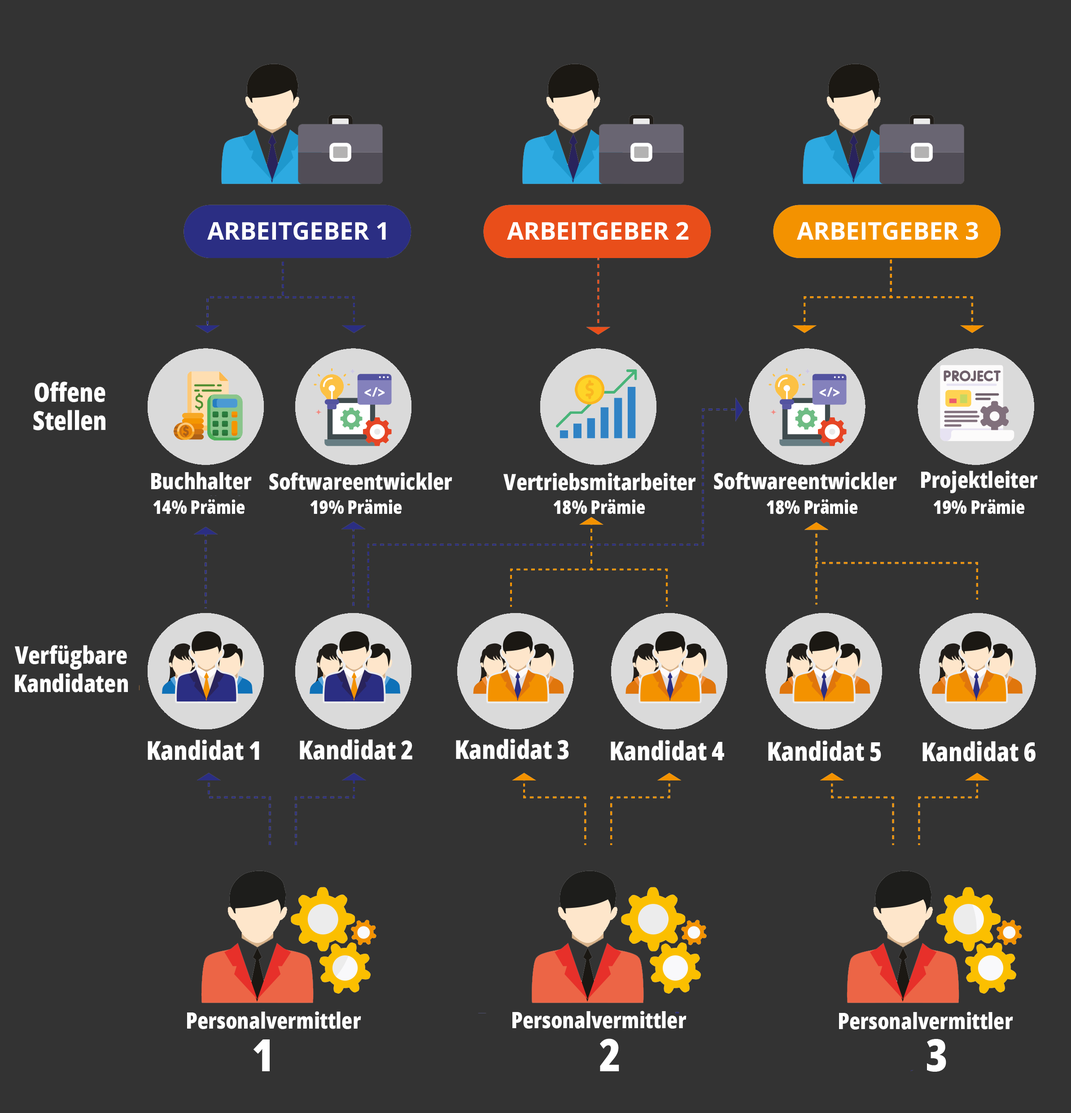
<style>
.page{position:relative;width:1071px;height:1113px;background:#333333}
.page>*{position:absolute;margin:0}
.t1{font:26.2px/28.1px "OpenSansRoman-CondensedExtraBold";color:#ffffff}
.t2{font:22.4px "OpenSansRoman-CondensedExtraBold";color:#ffffff}
.t3{font:18.7px "OpenSansRoman-CondensedExtraBold";color:#ffffff}
.t4{font:24.3px/28.1px "OpenSansRoman-CondensedExtraBold";color:#ffffff}
.t5{font:26.2px "OpenSansRoman-CondensedExtraBold";color:#ffffff}
.t6{font:44.9px "OpenSansRoman-CondensedExtraBold";color:#ffffff}
</style>
<div class="page">
<p class="t1" style="left:33px;top:381px;width:72px;height:49px;text-align:center">Offene<br>Stellen</p>
<p class="t2" style="left:151px;top:472px;width:101px;height:18px">Buchhalter</p>
<p class="t2" style="left:269px;top:472px;width:183px;height:18px">Softwareentwickler</p>
<p class="t2" style="left:504px;top:473px;width:192px;height:18px">Vertriebsmitarbeiter</p>
<p class="t2" style="left:714px;top:472px;width:183px;height:18px">Softwareentwickler</p>
<p class="t2" style="left:921px;top:470px;width:117px;height:23px">Projektleiter</p>
<p class="t3" style="left:153px;top:499px;width:92px;height:15px">14% Prämie</p>
<p class="t3" style="left:310px;top:499px;width:92px;height:15px">19% Prämie</p>
<p class="t3" style="left:553px;top:499px;width:92px;height:15px">18% Prämie</p>
<p class="t3" style="left:767px;top:499px;width:91px;height:15px">18% Prämie</p>
<p class="t3" style="left:934px;top:499px;width:91px;height:15px">19% Prämie</p>
<p class="t4" style="left:15px;top:645px;width:113px;height:48px;text-align:center">Verfügbare<br>Kandidaten</p>
<p class="t5" style="left:148px;top:740px;width:111px;height:20px">Kandidat 1</p>
<p class="t5" style="left:300px;top:739px;width:112px;height:21px">Kandidat 2</p>
<p class="t5" style="left:456px;top:739px;width:113px;height:20px">Kandidat 3</p>
<p class="t5" style="left:611px;top:740px;width:113px;height:21px">Kandidat 4</p>
<p class="t5" style="left:768px;top:741px;width:113px;height:20px">Kandidat 5</p>
<p class="t5" style="left:923px;top:741px;width:113px;height:21px">Kandidat 6</p>
<p class="t2" style="left:187px;top:1011px;width:174px;height:18px">Personalvermittler</p>
<p class="t2" style="left:513px;top:1011px;width:174px;height:18px">Personalvermittler</p>
<p class="t2" style="left:839px;top:1012px;width:174px;height:18px">Personalvermittler</p>
<p class="t6" style="left:253px;top:1039px;width:17px;height:32px">1</p>
<p class="t6" style="left:600px;top:1039px;width:19px;height:32px">2</p>
<p class="t6" style="left:927px;top:1039px;width:20px;height:33px">3</p>
</div>
